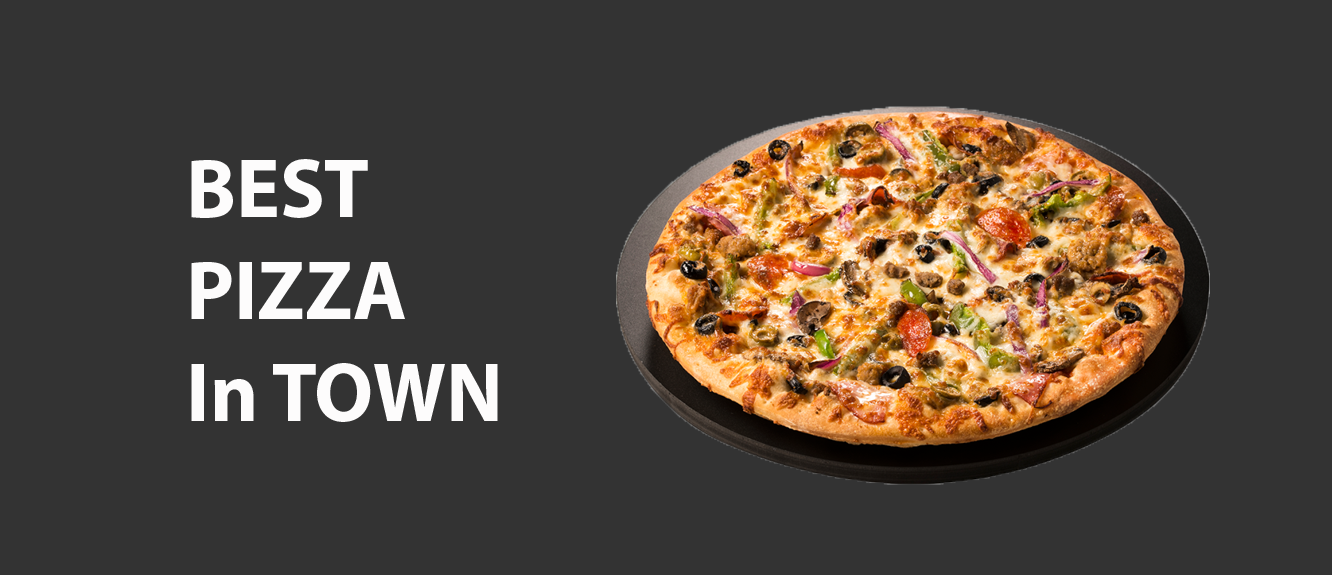
<style>
.page{position:relative;width:1332px;height:575px;background:#333333}
.page>*{position:absolute;margin:0}
.t1{font:85px "MyriadPro-Bold";color:#fdfcfc}
</style>
<div class="page">
<p class="t1" style="left:191px;top:159px;width:307px;height:263px">BEST <br>PIZZA<br>In TOWN</p>
</div>
